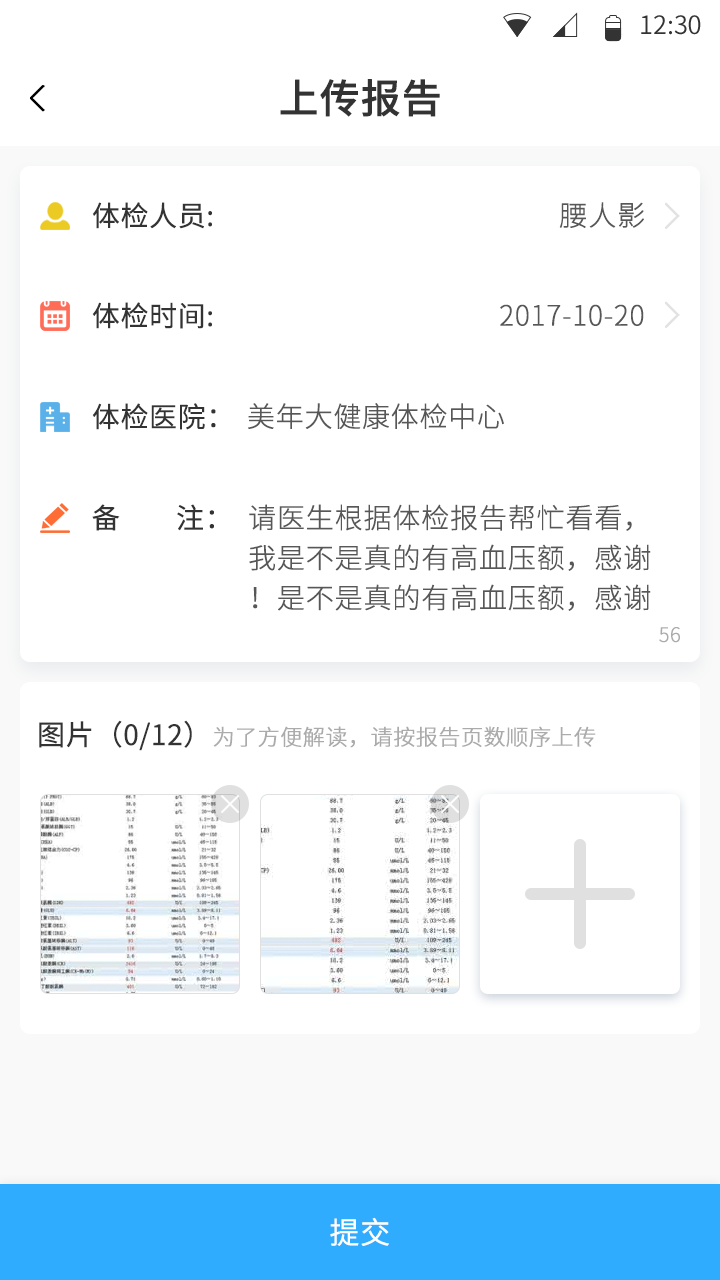
<style>
.page{position:relative;width:720px;height:1280px;background:#ffffff}
.page>*{position:absolute;margin:0}
.t1{font:25.4px "SourceHanSansCN-Normal";color:#333333}
.t2{font:40px "SourceHanSansCN-Medium";color:#333333;font-weight:bold}
.t3{font:28px "SourceHanSansCN-Normal";color:#333333;font-weight:bold}
.t4{font:28px "SourceHanSansCN-Light";color:#575757;font-weight:bold}
.t5{font:28px/40px "SourceHanSansCN-Light";color:#575757;font-weight:bold}
.t6{font:20px "SourceHanSansCN-Light";color:#ababab;font-weight:bold}
.t7{font:22px "SourceHanSansCN-Light";color:#ababab;font-weight:bold}
.t8{font:30px "SourceHanSansCN-Normal";color:#ffffff;font-weight:bold}
</style>
<div class="page">
<p class="t1" style="left:641px;top:15px;width:60px;height:20px">12:30</p>
<p class="t2" style="left:280px;top:79px;width:160px;height:38px">上传报告</p>
<p class="t3" style="left:92px;top:202px;width:120px;height:27px">体检人员:</p>
<p class="t4" style="left:559px;top:202px;width:85px;height:26px">腰人影</p>
<p class="t3" style="left:92px;top:302px;width:120px;height:27px">体检时间:</p>
<p class="t4" style="left:500px;top:304px;width:144px;height:22px">2017-10-20</p>
<p class="t3" style="left:92px;top:403px;width:124px;height:27px">体检医院：</p>
<p class="t4" style="left:248px;top:403px;width:256px;height:27px">美年大健康体检中心</p>
<p class="t3" style="left:92px;top:504px;width:122px;height:27px">备        注：</p>
<p class="t5" style="left:249px;top:504px;width:402px;height:107px">请医生根据体检报告帮忙看看，我是不是真的有高血压额，感谢！是不是真的有高血压额，感谢！</p>
<p class="t6" style="left:659px;top:627px;width:21px;height:16px">56</p>
<p class="t7" style="left:39px;top:720px;width:557px;height:31px"><span class="t3">图片（0/12）</span>为了方便解读，请按报告页数顺序上传</p>
<p class="t8" style="left:330px;top:1217px;width:59px;height:29px">提交</p>
</div>
